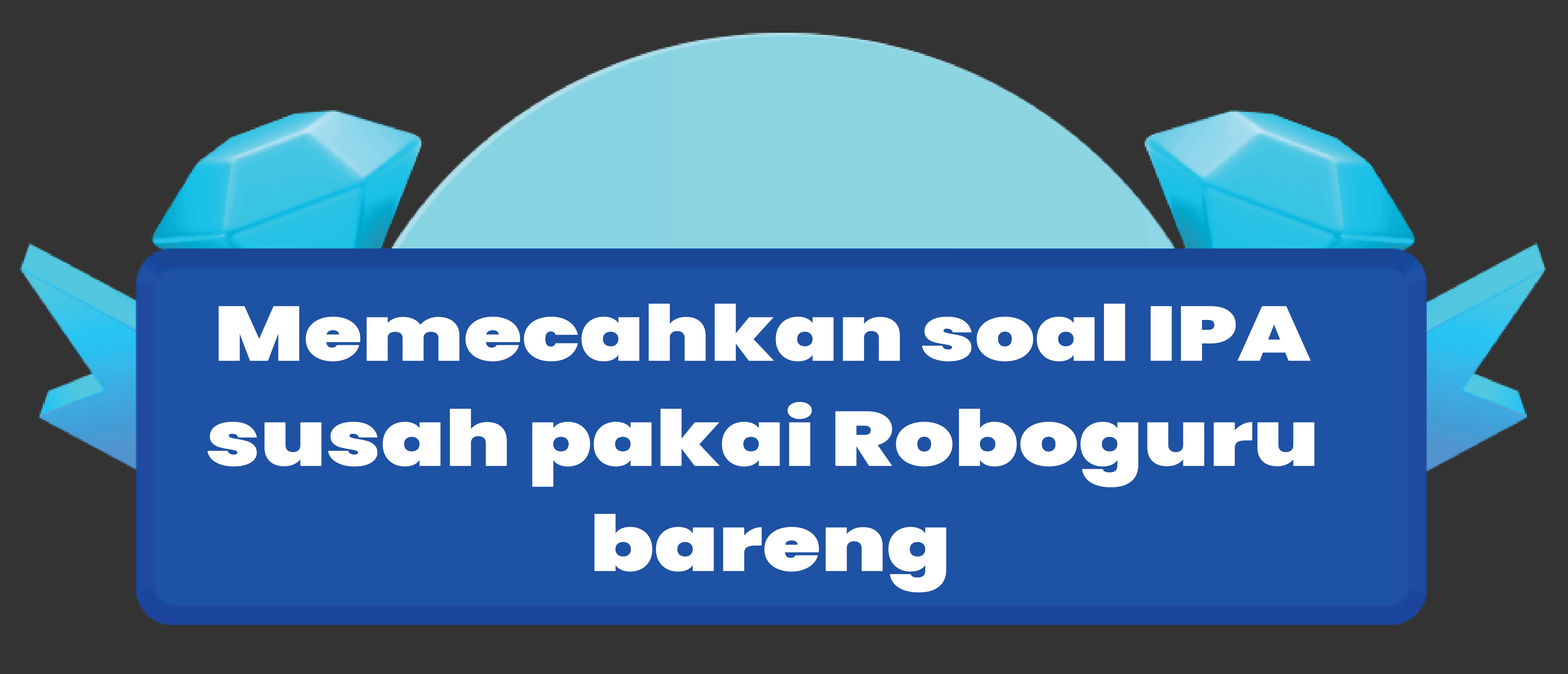
<style>
.page{position:relative;width:1568px;height:674px;background:#333333}
.page>*{position:absolute;margin:0}
.t1{font:77.1px/105.1px "Poppins-Black";color:#ffffff;scale:1.23 1}
</style>
<div class="page">
<p class="t1" style="left:207px;top:304px;width:1108px;height:288px;text-align:center">Memecahkan soal IPA <br>susah pakai Roboguru <br>bareng</p>
</div>
